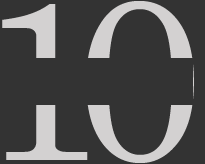
<style>
.page{position:relative;width:205px;height:164px;background:#333333}
.page>*{position:absolute;margin:0}
.t1{font:229.6px "Century";letter-spacing:-0.13em;color:#d3d1d1}
</style>
<div class="page">
<p class="t1" style="left:2px;top:1px;width:192px;height:162px">10</p>
</div>
